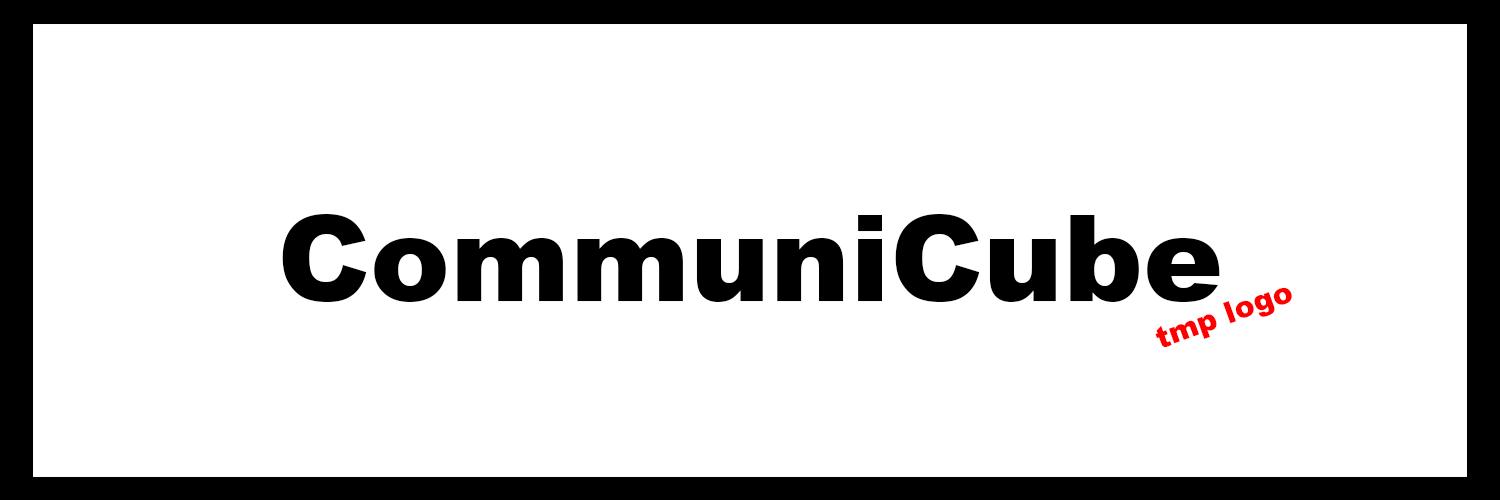
<style>
.page{position:relative;width:1500px;height:500px;background:#ffffff}
.page>*{position:absolute;margin:0}
.t1{font:120px "Arial-Black";color:#000000}
.t2{font:30px "Arial-Black";color:#ff0000}
</style>
<div class="page">
<p class="t1" style="left:282px;top:214px;width:938px;height:88px">CommuniCube</p>
<p class="t2" style="left:1155px;top:287px;width:137px;height:60px;rotate:-20deg">tmp logo</p>
</div>
